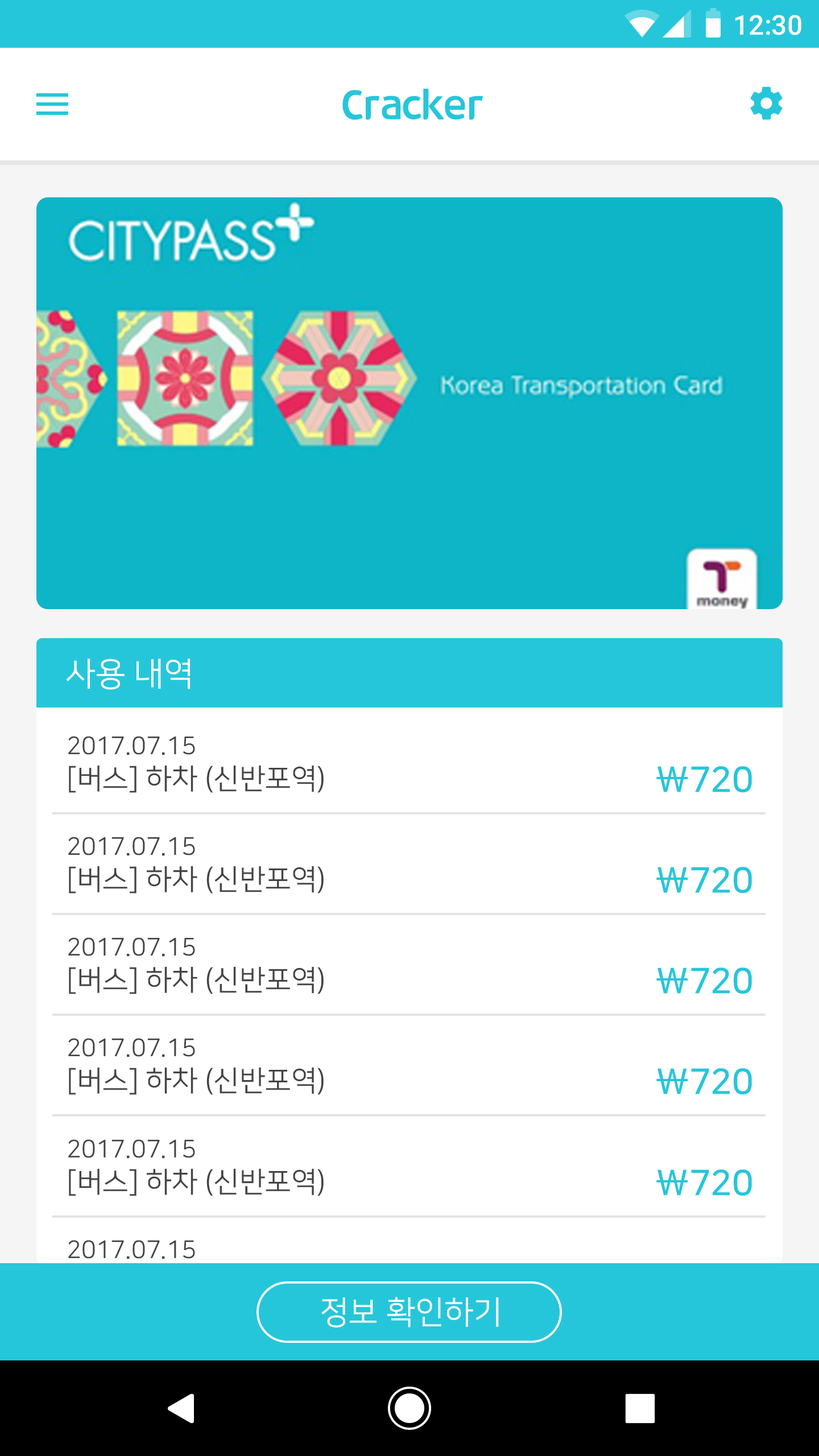
<style>
.page{position:relative;width:819px;height:1456px;background:#ffffff}
.page>*{position:absolute;margin:0}
.t1{font:27.3px "Roboto-Medium";color:#ffffff}
.t2{font:40.9px "12LotteMartHappyBold";color:#26c6da}
.t3{font:33px "NanumSquareR";color:#ffffff}
.t4{font:28.4px/34.1px "NanumSquareR";color:#434343}
.t5{font:24.5px/34.1px "NanumSquareR";color:#434343}
.t6{font:35.3px "NanumSquareB";color:#26c6da}
.t7{font:28.4px/34.1px "NanumSquareR";color:#26c6da}
.t8{font:24.5px/34.1px "NanumSquareR";color:#26c6da}
.t9{font:31.9px "NanumSquareR";color:#ffffff}
</style>
<div class="page">
<p class="t1" style="left:735px;top:15px;width:66px;height:20px">12:30</p>
<p class="t2" style="left:342px;top:89px;width:141px;height:31px">Cracker</p>
<p class="t3" style="left:66px;top:659px;width:124px;height:31px">사용 내역</p>
<p class="t4" style="left:68px;top:736px;width:256px;height:57px"><span class="t5">2017.07.15<br></span>[버스] 하차 (신반포역)</p>
<p class="t6" style="left:656px;top:766px;width:96px;height:27px">\720</p>
<p class="t4" style="left:68px;top:837px;width:256px;height:56px"><span class="t5">2017.07.15<br></span>[버스] 하차 (신반포역)</p>
<p class="t6" style="left:656px;top:867px;width:96px;height:26px">\720</p>
<p class="t4" style="left:68px;top:937px;width:256px;height:57px"><span class="t5">2017.07.15<br></span>[버스] 하차 (신반포역)</p>
<p class="t6" style="left:656px;top:967px;width:96px;height:27px">\720</p>
<p class="t4" style="left:68px;top:1038px;width:256px;height:57px"><span class="t5">2017.07.15<br></span>[버스] 하차 (신반포역)</p>
<p class="t6" style="left:656px;top:1068px;width:96px;height:27px">\720</p>
<p class="t4" style="left:68px;top:1139px;width:256px;height:57px"><span class="t5">2017.07.15<br></span>[버스] 하차 (신반포역)</p>
<p class="t6" style="left:656px;top:1169px;width:96px;height:27px">\720</p>
<p class="t7" style="left:68px;top:1240px;width:256px;height:57px"><span class="t8">2017.07.15<br></span>[버스] 하차 (신반포역)</p>
<p class="t9" style="left:321px;top:1297px;width:178px;height:30px">정보 확인하기</p>
</div>
